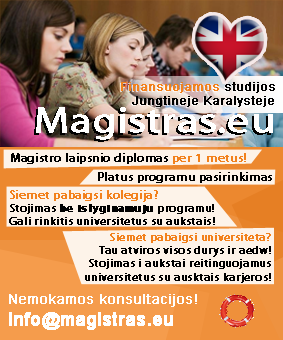
<style>
.page{position:relative;width:283px;height:340px;background:#fdf3e9}
.page>*{position:absolute;margin:0}
.t1{font:12px "ArialMT";color:#000000;font-weight:bold}
.t2{font:12px "ArialMT";color:#f2811c;font-weight:bold}
.t3{font:36px "MyriadPro-Regular";color:#ffffff;font-weight:bold;scale:1.2 1}
.t4{font:12px "MyriadPro-Regular";color:#000000;font-weight:bold}
.t5{font:12px "MyriadPro-Regular";color:#f2811c;font-weight:bold}
.t6{font:11px "MyriadPro-Regular";color:#000000;font-weight:bold}
.t7{font:11px "MyriadPro-Bold";color:#000000;font-weight:bold}
.t8{font:11px "MyriadPro-Regular";color:#f2811c;font-weight:bold}
.t9{font:14px "ArialMT";color:#ffffff;font-weight:bold}
.t10{font:18px "ArialMT";color:#ffffff;font-weight:bold}
</style>
<div class="page">
<p class="t1" style="left:121px;top:82px;width:154px;height:25px"><span class="t2">Finansuojamos </span>studijos<br>   Jungtineje Karalysteje</p>
<p class="t3" style="left:36px;top:107px;width:237px;height:33px">Magistras.eu</p>
<p class="t4" style="left:11px;top:153px;width:235px;height:11px">Magistro laipsnio diplomas <span class="t5">per 1 metus!</span></p>
<p class="t4" style="left:98px;top:172px;width:174px;height:11px">Platus programu pasirinkimas</p>
<p class="t6" style="left:9px;top:190px;width:206px;height:35px"><span class="t5">Siemet pabaigsi kolegija?<br></span>Stojimas <span class="t7">be islyginamuju</span> programu!<br>Gali rinkitis universitetus su aukstais!</p>
<p class="t6" style="left:85px;top:233px;width:186px;height:50px;text-align:right"><span class="t8">Siemet pabaigsi universiteta?<br></span>Tau atviros visos durys ir aedw!<br>Stojimas i aukstai reitinguojamus<br>universitetus su ausktais karjeros!</p>
<p class="t9" style="left:9px;top:294px;width:188px;height:36px">Nemokamos konsultacijos!<br><span class="t10">info@magistras.eu</span></p>
</div>
